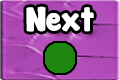
<style>
.page{position:relative;width:120px;height:80px}
.page>*{position:absolute;margin:0}
.t1{font:30px "JandaManateeSolid";color:#ffffff}
</style>
<div class="page">
<p class="t1" style="left:26px;top:6px;width:68px;height:26px">Next</p>
</div>
